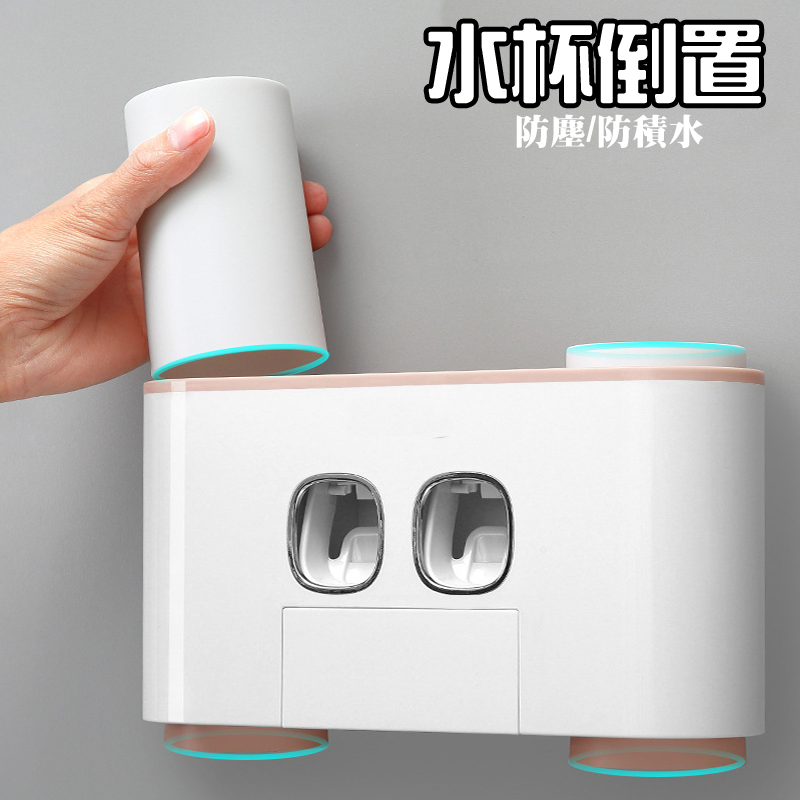
<style>
.page{position:relative;width:800px;height:800px}
.page>*{position:absolute;margin:0}
.t1{font:84.7px "HanWangZonYi";color:#ffffff}
.t2{font:36px "HanWangMingBlack";color:#ffffff}
</style>
<div class="page">
<p class="t1" style="left:428px;top:23px;width:333px;height:81px">水杯倒置</p>
<p class="t2" style="left:516px;top:114px;width:187px;height:34px">防塵/防積水</p>
</div>
